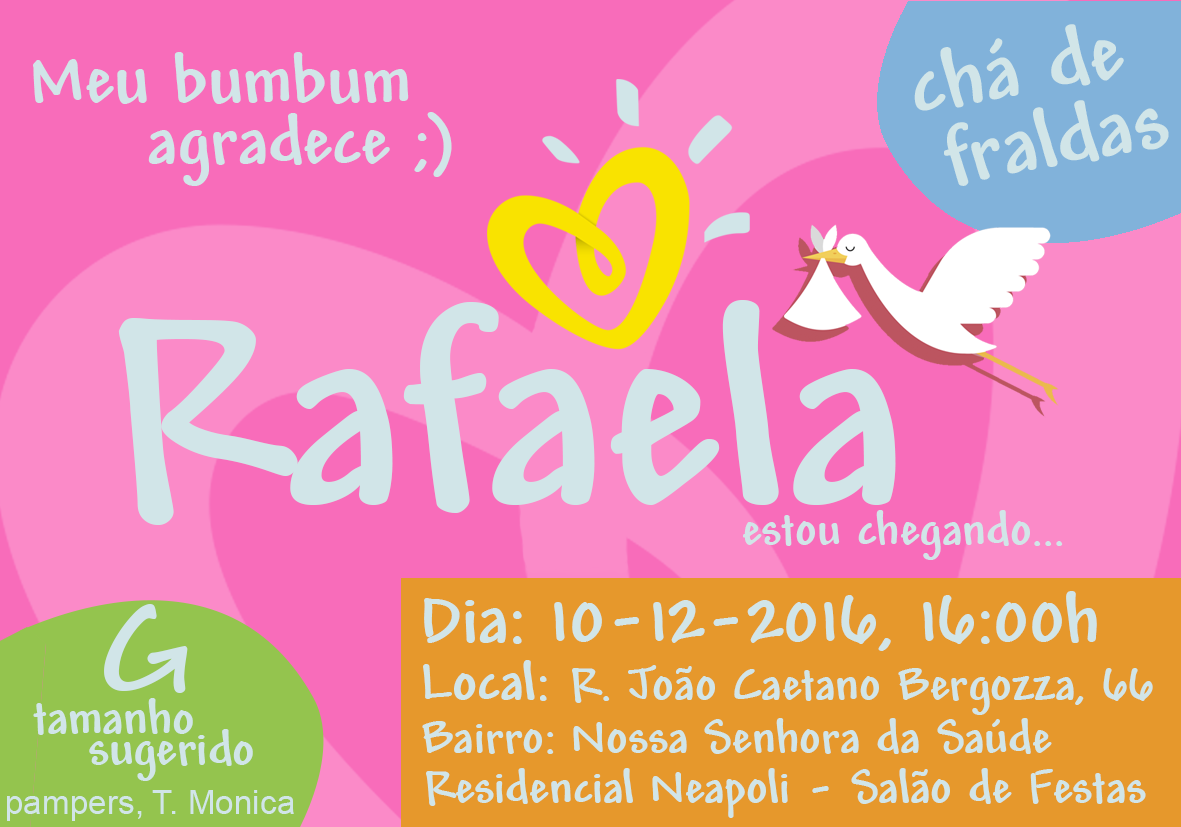
<style>
.page{position:relative;width:1181px;height:827px;background:#f86cba}
.page>*{position:absolute;margin:0}
.t1{font:88px "Andy-Bold";color:#d1e5e8}
.t2{font:74px "Andy-Bold";color:#d1e5e8}
.t3{font:293.9px "Andy-Bold";color:#d1e5e8}
.t4{font:50px "Andy-Bold";color:#d1e5e8}
.t5{font:75px "Andy-Bold";color:#d1e5e8}
.t6{font:125px "Andy-Bold";color:#d1e5e8;scale:1.1 1}
.t7{font:58.3px "Andy-Bold";color:#d1e5e8}
.t8{font:51.7px "Andy-Bold";color:#d1e5e8}
.t9{font:33.3px "ArialMT";color:#d1e5e8}
</style>
<div class="page">
<p class="t1" style="left:914px;top:24px;width:210px;height:87px;rotate:-10deg">chá de</p>
<p class="t2" style="left:33px;top:52px;width:376px;height:52px">Meu bumbum</p>
<p class="t1" style="left:944px;top:100px;width:225px;height:86px;rotate:-10deg">fraldas</p>
<p class="t2" style="left:148px;top:112px;width:304px;height:74px">agradece ;)</p>
<p class="t3" style="left:118px;top:300px;width:778px;height:225px">Rafaela</p>
<p class="t4" style="left:743px;top:510px;width:320px;height:50px">estou chegando...</p>
<p class="t5" style="left:424px;top:591px;width:673px;height:60px">Dia: 10-12-2016, 16:00h</p>
<p class="t6" style="left:104px;top:604px;width:84px;height:89px">G</p>
<p class="t4" style="left:423px;top:660px;width:730px;height:55px"><span class="t7">Local: </span>R. João Caetano Bergozza, 66</p>
<p class="t8" style="left:33px;top:698px;width:160px;height:37px">tamanho</p>
<p class="t4" style="left:422px;top:718px;width:630px;height:36px">Bairro: Nossa Senhora da Saúde</p>
<p class="t8" style="left:89px;top:729px;width:164px;height:52px">sugerido</p>
<p class="t4" style="left:426px;top:768px;width:720px;height:50px">Residencial Neapoli - Salão de Festas</p>
<p class="t9" style="left:7px;top:790px;width:287px;height:31px">pampers, T. Monica</p>
</div>
